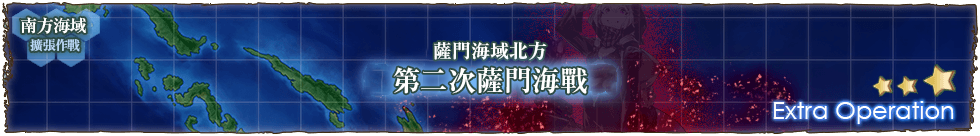
<style>
.page{position:relative;width:980px;height:136px}
.page>*{position:absolute;margin:0}
.t1{font:17px/22px "RyuminPr6N-ExBold";letter-spacing:-0.04em;color:#ffffff}
.t2{font:13px/22px "RyuminPr6N-ExBold";letter-spacing:-0.04em;color:#b9d7f5}
.t3{font:19px "RyuminPro-ExBold";color:#ffffff}
.t4{font:28px "RyuminPro-ExBold";color:#ffffff}
</style>
<div class="page">
<p class="t1" style="left:20px;top:17px;width:66px;height:35px">南方海域<br>　  <span class="t2">擴張作戰</span></p>
<p class="t3" style="left:434px;top:41px;width:113px;height:19px">薩門海域北方</p>
<p class="t4" style="left:393px;top:67px;width:195px;height:27px">第二次薩門海戰</p>
</div>
